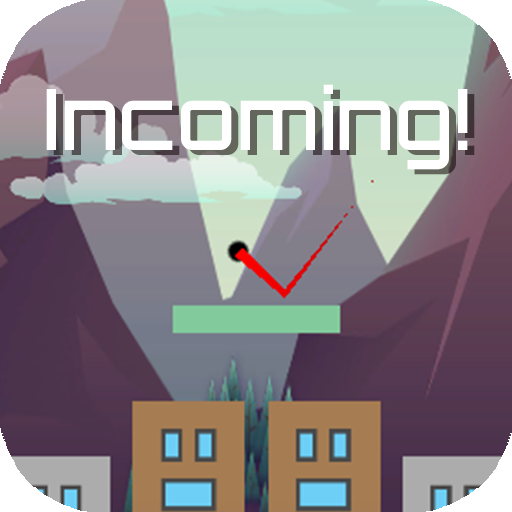
<style>
.page{position:relative;width:512px;height:512px}
.page>*{position:absolute;margin:0}
.t1{font:85px "Orbitron-Medium";color:#ffffff}
</style>
<div class="page">
<p class="t1" style="left:46px;top:84px;width:422px;height:86px">Incoming!</p>
</div>
